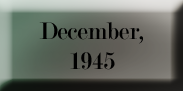
<style>
.page{position:relative;width:183px;height:91px}
.page>*{position:absolute;margin:0}
.t1{font:25.4px "Modern-Regular";color:#000000}
</style>
<div class="page">
<p class="t1" style="left:39px;top:22px;width:104px;height:48px;text-align:center">December, 1945</p>
</div>
